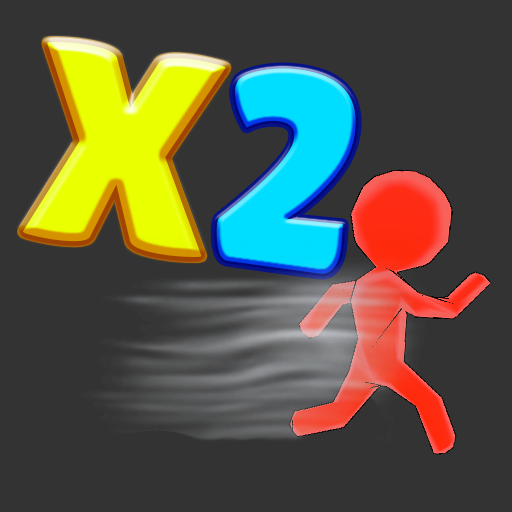
<style>
.page{position:relative;width:512px;height:512px;background:#333333}
.page>*{position:absolute;margin:0}
.t1{font:280px "LilitaOne";letter-spacing:0.18em}
.t2{font:280px "LilitaOne";letter-spacing:0.18em;color:#00deff}
</style>
<div class="page">
<p class="t1" style="left:23px;top:42px;width:203px;height:215px;rotate:8deg">X</p>
<p class="t2" style="left:216px;top:68px;width:140px;height:206px;rotate:8deg">2</p>
</div>
